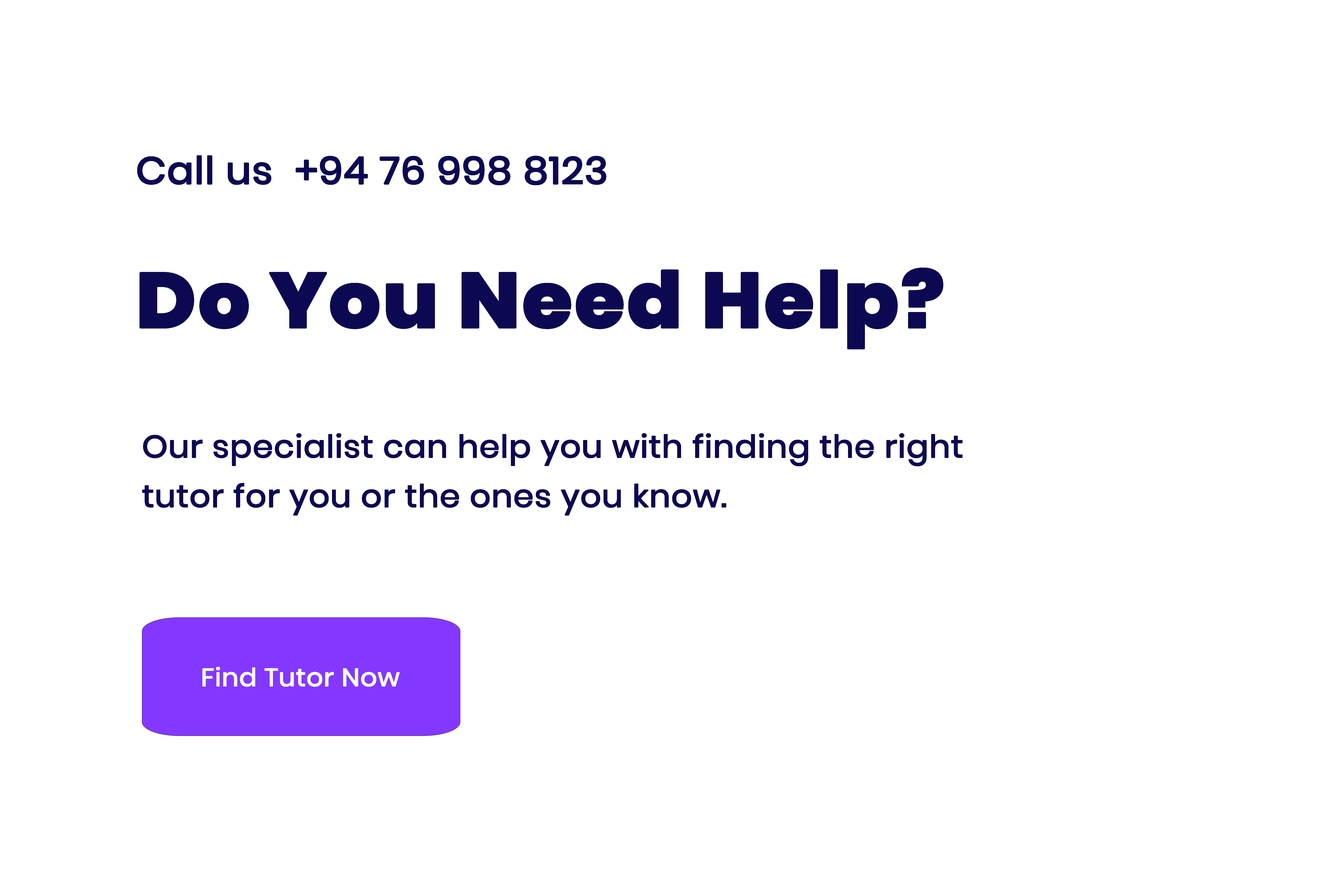
<style>
.page{position:relative;width:1337px;height:892px;background:#ffffff}
.page>*{position:absolute;margin:0}
.t1{font:37.4px "Poppins-Regular";color:#0c0852;font-weight:bold;scale:1.05 1}
.t2{font:77.4px "Poppins-ExtraBold";color:#0c0852;font-weight:bold;scale:1.05 1}
.t3{font:31px/49.5px "Poppins-Regular";color:#0c0852;font-weight:bold;scale:1.05 1}
.t4{font:24.8px "Poppins-Regular";color:#ffffff;font-weight:bold;scale:1.05 1}
</style>
<div class="page">
<p class="t1" style="left:137px;top:155px;width:470px;height:30px">Call us  +94 76 998 8123</p>
<p class="t2" style="left:140px;top:267px;width:804px;height:82px">Do You Need Help?</p>
<p class="t3" style="left:142px;top:433px;width:821px;height:82px">Our specialist can help you with finding the right<br>tutor for you or the ones you know.</p>
<p class="t4" style="left:202px;top:666px;width:198px;height:20px">Find Tutor Now</p>
</div>
